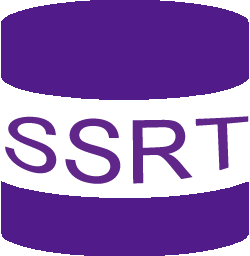
<style>
.page{position:relative;width:250px;height:256px;background:#511b89}
.page>*{position:absolute;margin:0}
.t1{font:60px "ArialMT";color:#602689;scale:1.55 1}
</style>
<div class="page">
<p class="t1" style="left:5px;top:116px;width:244px;height:68px">SSRT</p>
</div>
